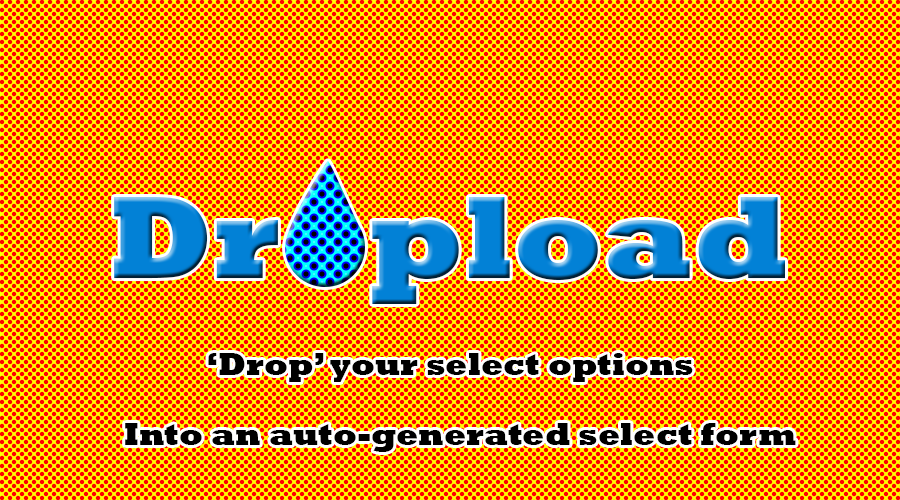
<style>
.page{position:relative;width:900px;height:500px;background:#ffff00}
.page>*{position:absolute;margin:0}
.t1{font:120px "Rockwell-ExtraBold";color:#0281d6}
.t2{font:32px "Rockwell-ExtraBold";color:#000000}
</style>
<div class="page">
<p class="t1" style="left:114px;top:197px;width:671px;height:107px">Dr   pload</p>
<p class="t2" style="left:208px;top:353px;width:485px;height:29px">‘Drop’ your select options</p>
<p class="t2" style="left:125px;top:423px;width:671px;height:29px">Into an auto-generated select form</p>
</div>
